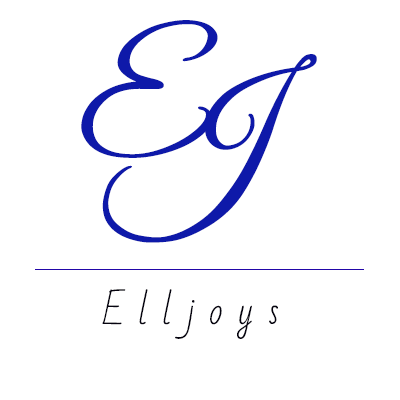
<style>
.page{position:relative;width:400px;height:400px;background:#ffffff}
.page>*{position:absolute;margin:0}
.t1{font:160.2px "GreatVibes-Regular";color:#0e19a9}
.t2{font:36px "BadScript-Regular";color:#05030f}
</style>
<div class="page">
<p class="t1" style="left:81px;top:20px;width:137px;height:138px">E</p>
<p class="t1" style="left:102px;top:54px;width:215px;height:189px">J</p>
<p class="t2" style="left:102px;top:289px;width:176px;height:50px">E l l j o y s</p>
</div>
